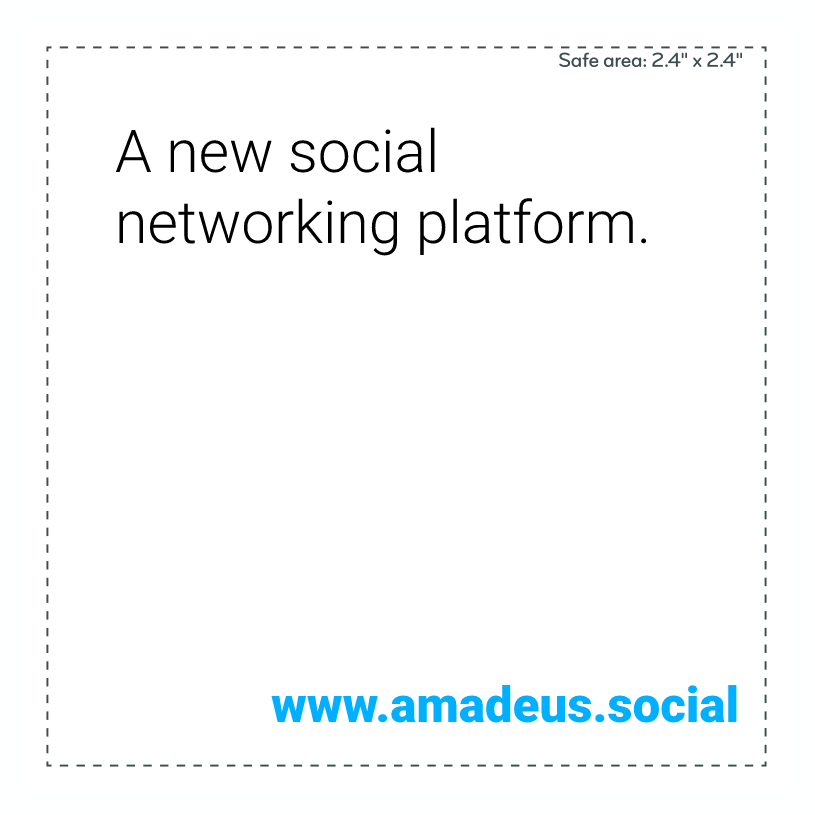
<style>
.page{position:relative;width:815px;height:815px;background:#ffffff}
.page>*{position:absolute;margin:0}
.t1{font:59px "Roboto-Light";color:#000000}
.t2{font:49.3px "Roboto-Black";color:#00b0ff}
</style>
<div class="page">
<p class="t1" style="left:115px;top:127px;width:532px;height:129px">A new social networking platform.</p>
<p class="t2" style="left:271px;top:685px;width:466px;height:38px">www.amadeus.social</p>
</div>
